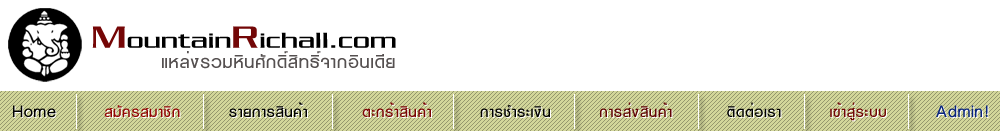
<style>
.page{position:relative;width:1000px;height:131px;background:#ffffff}
.page>*{position:absolute;margin:0}
.t1{font:23.5px "ChaneyWideNormal";color:#000000}
.t2{font:33.9px "ChaneyWideNormal";color:#750606}
.t3{font:33.9px "ChaneyWideNormal";color:#730707}
.t4{font:20px "DTAC-Medium";color:#000000}
.t5{font:20px "DTAC-Medium";color:#930505}
.t6{font:20px "DTAC-Medium";color:#7b0404}
.t7{font:20px "DTAC-Medium";color:#610404}
.t8{font:20px "DTAC-Medium";color:#700505}
.t9{font:20px "DTAC-Medium";color:#08247f}
</style>
<div class="page">
<p class="t1" style="left:92px;top:26px;width:304px;height:22px"><span class="t2">M</span>ountain<span class="t3">R</span>ichall.com</p>
<p class="t4" style="left:13px;top:102px;width:975px;height:19px">Home        <span class="t5">ÊÁÑ¤ÃÊÁÒªÔ¡</span>        ÃÒÂ¡ÒÃÊÔ¹¤éÒ         <span class="t6">µÐ¡ÃéÒÊÔ¹¤éÒ</span>        ¡ÒÃªÓÃÐà§Ô¹        <span class="t7">¡ÒÃÊè§ÊÔ¹¤éÒ</span>         µÔ´µèÍàÃÒ        <span class="t8">à¢éÒÊÙèÃÐºº        </span><span class="t9">Admin!</span></p>
</div>
